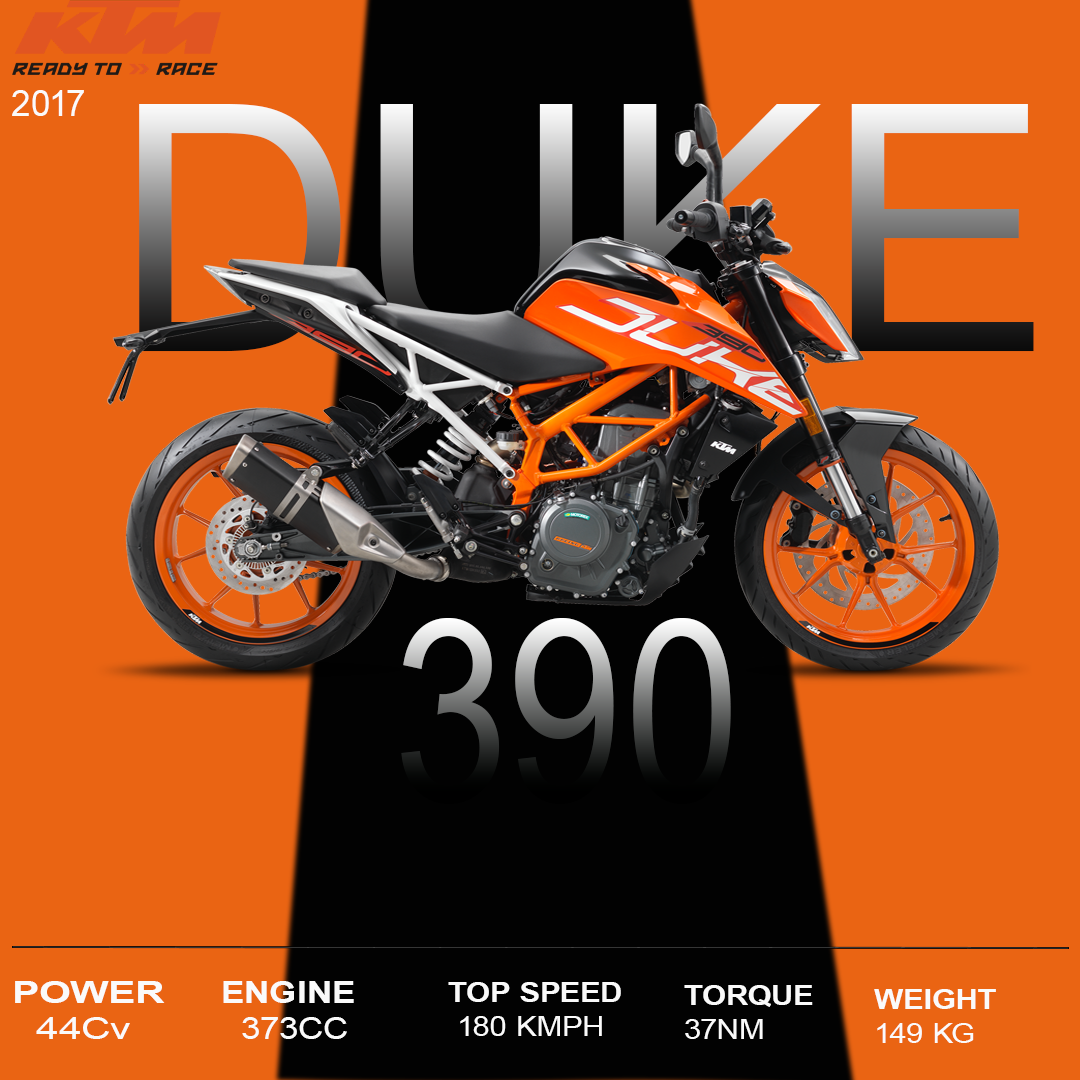
<style>
.page{position:relative;width:1080px;height:1080px;background:#ea6413}
.page>*{position:absolute;margin:0}
.t1{font:35.6px "ArialMT";letter-spacing:0.01em;color:#fafafa}
.t2{font:345.4px "ArialMT";letter-spacing:0.01em}
.t3{font:254px "ArialNarrow";letter-spacing:0.01em}
.t4{font:29.7px "Arial-BoldMT";letter-spacing:0.01em;color:#fafafa;scale:1.37 1}
.t5{font:29.7px "ArialMT";letter-spacing:0.01em;color:#fafafa;scale:1.37 1}
.t6{font:30.1px "Arial-BoldMT";letter-spacing:0.01em;color:#fafafa;scale:1.17 1}
.t7{font:30.1px "ArialMT";letter-spacing:0.01em;color:#fafafa;scale:1.17 1}
.t8{font:27.9px "Arial-BoldMT";letter-spacing:0.01em;color:#fafafa;scale:1.1 1}
.t9{font:27.9px "ArialMT";letter-spacing:0.01em;color:#fafafa;scale:1.1 1}
</style>
<div class="page">
<p class="t1" style="left:12px;top:90px;width:72px;height:26px">2017</p>
<p class="t2" style="left:139px;top:104px;width:895px;height:251px">DUKE</p>
<p class="t3" style="left:401px;top:618px;width:330px;height:186px">390</p>
<p class="t4" style="left:15px;top:981px;width:150px;height:58px">POWER<br><span class="t5">  44Cv</span></p>
<p class="t6" style="left:223px;top:981px;width:131px;height:58px">ENGINE<br><span class="t7">  373CC</span></p>
<p class="t8" style="left:448px;top:982px;width:173px;height:54px">TOP SPEED<br><span class="t9"> 180 KMPH</span></p>
<p class="t8" style="left:684px;top:985px;width:129px;height:54px">TORQUE<br><span class="t9">37NM</span></p>
<p class="t8" style="left:874px;top:989px;width:122px;height:54px">WEIGHT<br><span class="t9">149 KG</span></p>
</div>
